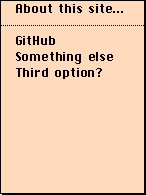
<style>
.page{position:relative;width:146px;height:195px;background:#ffdabc}
.page>*{position:absolute;margin:0}
.t1{font:16px "ChiKareGo";letter-spacing:0.05em;color:#000000}
.t2{font:16px/16px "ChiKareGo";letter-spacing:0.05em;color:#000000}
</style>
<div class="page">
<p class="t1" style="left:16px;top:4px;width:107px;height:9px">About this site...</p>
<p class="t2" style="left:16px;top:36px;width:97px;height:43px">GitHub<br>Something else<br>Third option?</p>
</div>
